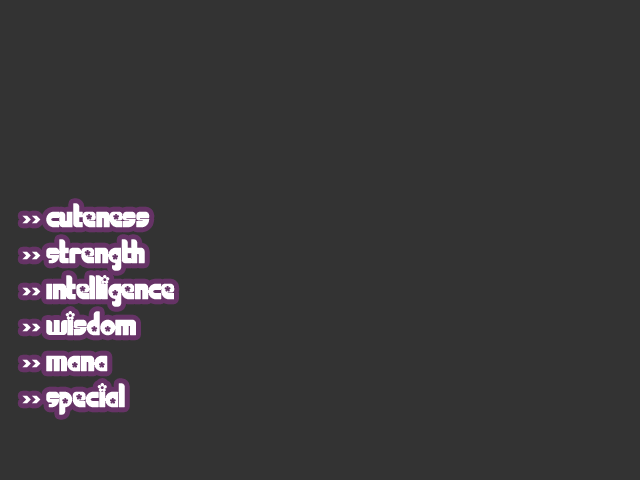
<style>
.page{position:relative;width:640px;height:480px;background:#333333}
.page>*{position:absolute;margin:0}
.t1{font:30px "Chick";color:#ffffff}
</style>
<div class="page">
<p class="t1" style="left:22px;top:203px;width:153px;height:212px">&gt;&gt; cuteness<br>&gt;&gt; Strength<br>&gt;&gt; Intelligence<br>&gt;&gt; Wisdom<br>&gt;&gt; Mana<br>&gt;&gt; Special</p>
</div>
